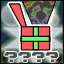
<style>
.page{position:relative;width:64px;height:64px}
.page>*{position:absolute;margin:0}
.t1{font:10px "M42_FLIGHT-721";color:#4f4f4f}
</style>
<div class="page">
<p class="t1" style="left:4px;top:52px;width:55px;height:10px">????</p>
</div>
